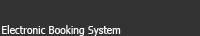
<style>
.page{position:relative;width:200px;height:36px;background:#333333}
.page>*{position:absolute;margin:0}
.t1{font:10.7px "Tahoma";color:#fbfbfc;scale:0.96 1}
</style>
<div class="page">
<p class="t1" style="left:2px;top:25px;width:119px;height:11px">Electronic Booking System</p>
</div>
